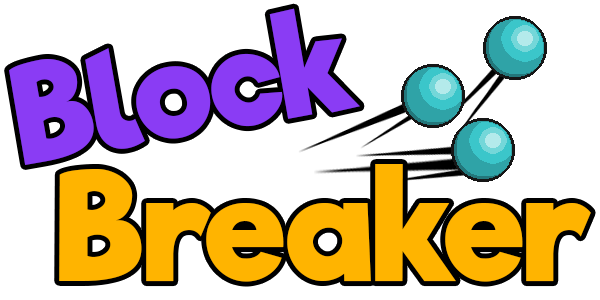
<style>
.page{position:relative;width:600px;height:300px;background:#ffffff}
.page>*{position:absolute;margin:0}
.t1{font:131.7px "RifficFree-Bold";letter-spacing:0.005em;color:#8a3cf4}
.t2{font:144.8px "RifficFree-Bold";letter-spacing:0.005em;color:#ffb400}
</style>
<div class="page">
<p class="t1" style="left:9px;top:8px;width:351px;height:157px;rotate:-10deg">Block</p>
<p class="t2" style="left:59px;top:164px;width:532px;height:118px">Breaker</p>
</div>
